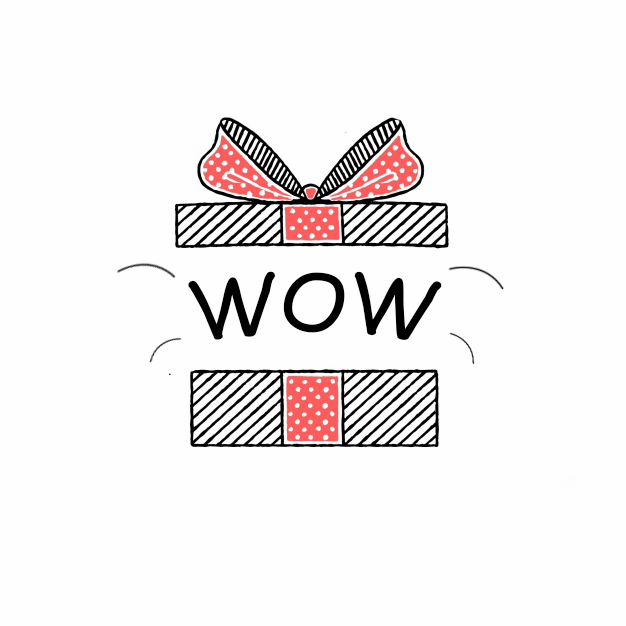
<style>
.page{position:relative;width:626px;height:626px;background:#fefefe}
.page>*{position:absolute;margin:0}
.t1{font:79.7px "ComicSansMS";color:#000000}
</style>
<div class="page">
<p class="t1" style="left:188px;top:271px;width:254px;height:69px">WOW</p>
</div>
